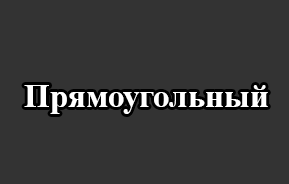
<style>
.page{position:relative;width:289px;height:184px;background:#333333}
.page>*{position:absolute;margin:0}
.t1{font:32.9px "TimesNewRomanPS-BoldMT";color:#ffffff}
</style>
<div class="page">
<p class="t1" style="left:24px;top:85px;width:244px;height:29px">Прямоугольный</p>
</div>
